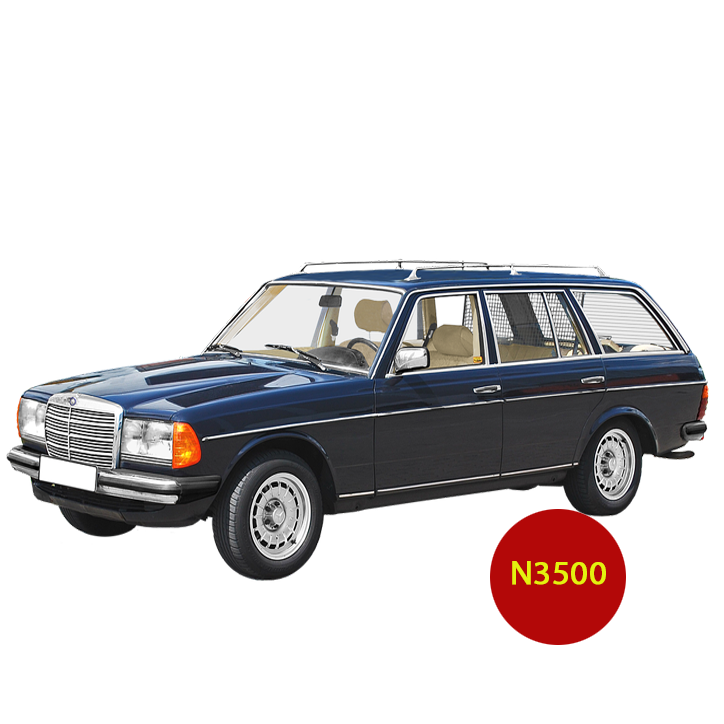
<style>
.page{position:relative;width:724px;height:724px;background:#ffffff}
.page>*{position:absolute;margin:0}
.t1{font:58.4px "MyriadPro-Regular";color:#e4f10f;font-weight:bold}
</style>
<div class="page">
<p class="t1" style="left:512px;top:561px;width:94px;height:24px">N3500</p>
</div>
